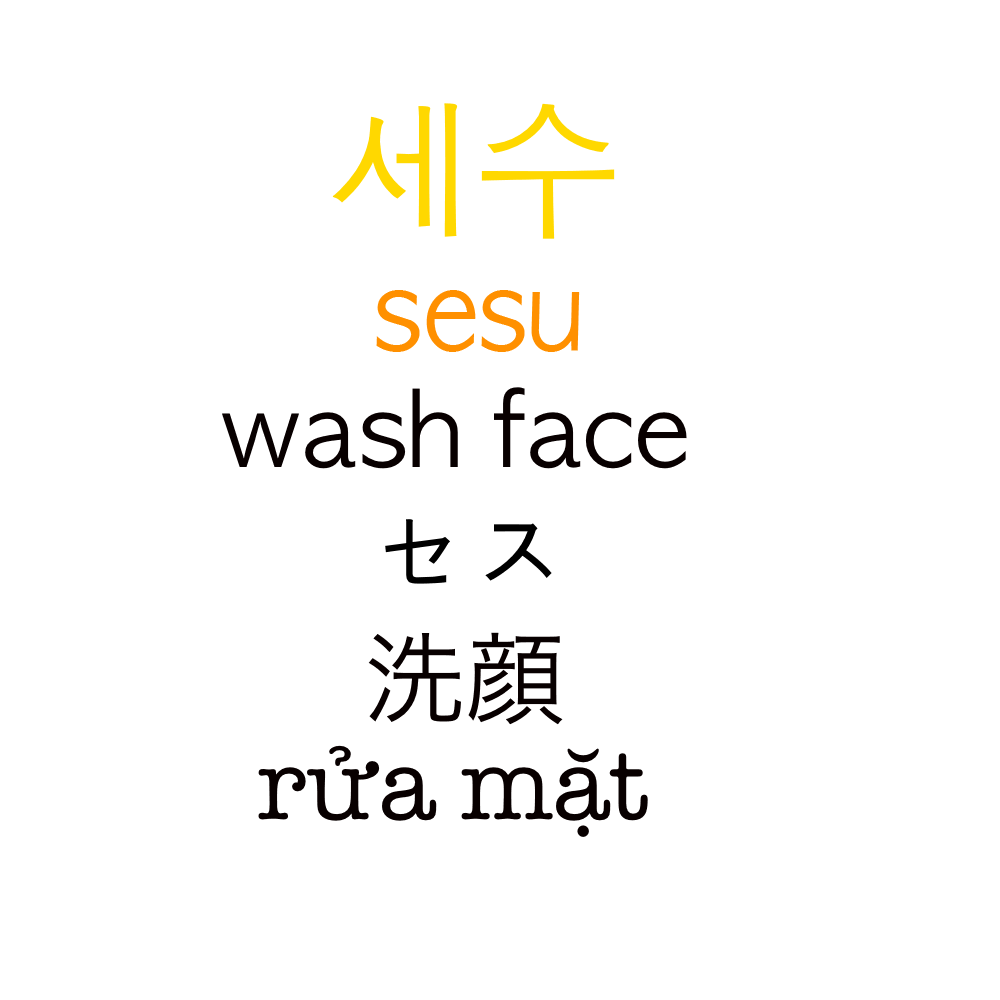
<style>
.page{position:relative;width:1000px;height:1000px;background:#ffffff}
.page>*{position:absolute;margin:0}
.t1{font:150px "AppleGothic";color:#ffd800}
.t2{font:111.2px "AppleGothic";color:#ff9000;scale:0.9 1}
.t3{font:100px "AppleGothic";color:#080000}
.t4{font:100px "AppleGothic";color:#000000}
.t5{font:100px "HiraKakuProN-W3";color:#080000}
.t6{font:100px "AmericanTypewriter";color:#080000}
.t7{font:100px "BalooDa-Regular";color:#080000}
</style>
<div class="page">
<p class="t1" style="left:332px;top:103px;width:283px;height:136px">세수</p>
<p class="t2" style="left:376px;top:290px;width:204px;height:62px">sesu</p>
<p class="t3" style="left:222px;top:387px;width:465px;height:82px">wash face</p>
<p class="t4" style="left:385px;top:519px;width:167px;height:65px">セス</p>
<p class="t5" style="left:368px;top:632px;width:195px;height:93px">洗顔</p>
<p class="t6" style="left:258px;top:745px;width:390px;height:92px"><span class="t7">　</span>rửa mặt</p>
</div>
